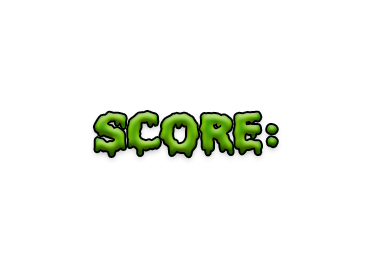
<style>
.page{position:relative;width:370px;height:270px;background:#ffffff}
.page>*{position:absolute;margin:0}
.t1{font:55px "Liquidismpart2"}
</style>
<div class="page">
<p class="t1" style="left:95px;top:112px;width:182px;height:45px">:SCORE</p>
</div>
